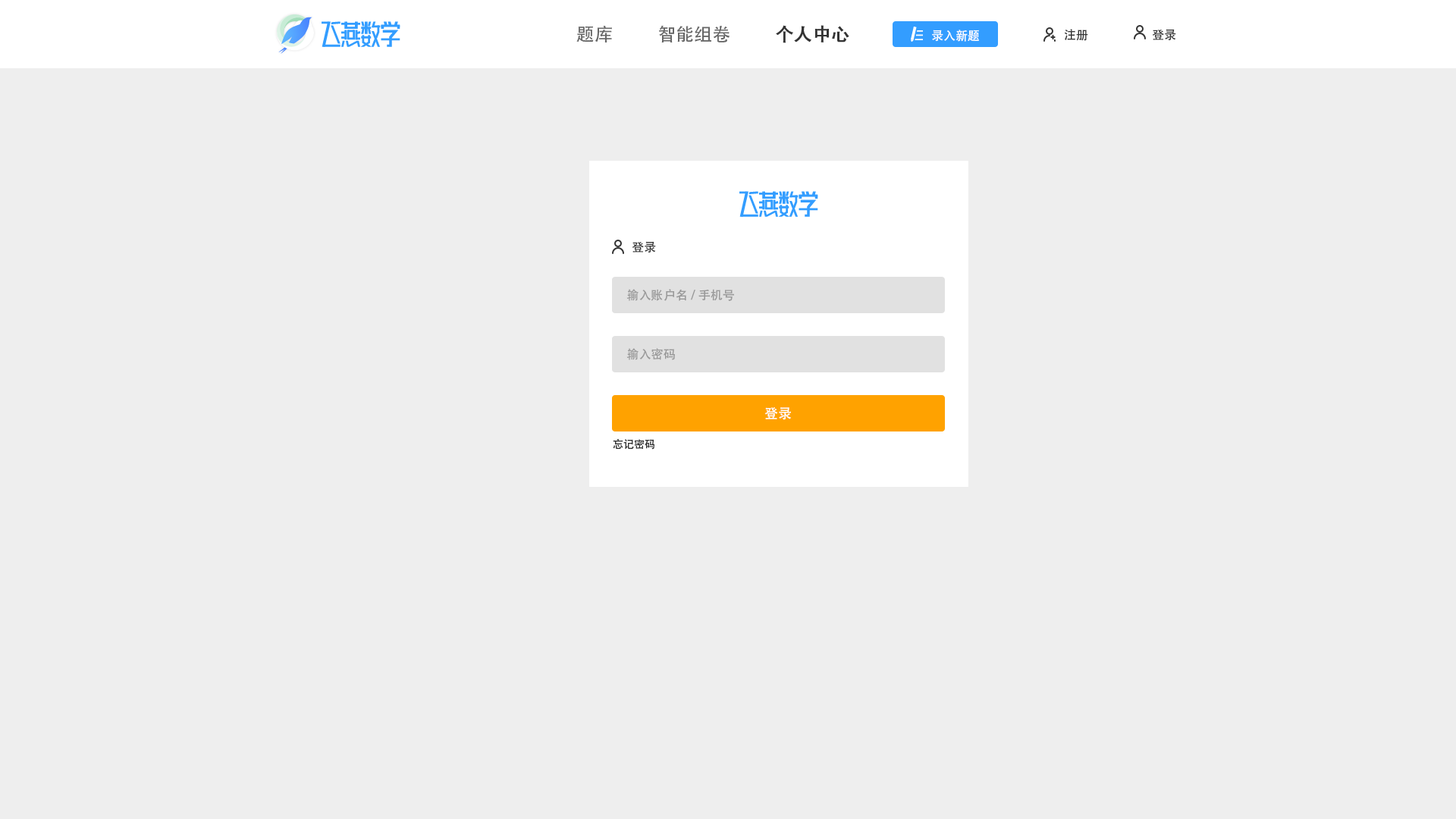
<style>
.page{position:relative;width:1456px;height:819px;background:#eeeeee}
.page>*{position:absolute;margin:0}
.t1{font:18.2px "AdobeHeitiStd-Regular";color:#666666}
.t2{font:18.2px "AdobeHeitiStd-Regular";color:#333333;font-weight:bold}
.t3{font:12.1px "AdobeHeitiStd-Regular";color:#ffffff}
.t4{font:12.1px "AdobeHeitiStd-Regular";color:#333333}
.t5{font:12.1px "AdobeHeitiStd-Regular";color:#999999}
.t6{font:13.6px "AdobeHeitiStd-Regular";color:#ffffff}
.t7{font:10.6px "AdobeHeitiStd-Regular";color:#333333}
</style>
<div class="page">
<p class="t1" style="left:576px;top:26px;width:36px;height:16px">题库</p>
<p class="t1" style="left:659px;top:25px;width:71px;height:17px">智能组卷</p>
<p class="t2" style="left:776px;top:25px;width:73px;height:18px">个人中心</p>
<p class="t3" style="left:932px;top:30px;width:47px;height:12px">录入新题</p>
<p class="t4" style="left:1064px;top:29px;width:24px;height:12px">注册</p>
<p class="t4" style="left:1152px;top:29px;width:24px;height:12px">登录</p>
<p class="t4" style="left:632px;top:241px;width:24px;height:12px">登录</p>
<p class="t5" style="left:626px;top:289px;width:108px;height:12px">输入账户名/手机号</p>
<p class="t5" style="left:626px;top:348px;width:49px;height:12px">输入密码</p>
<p class="t6" style="left:764px;top:407px;width:27px;height:13px">登录</p>
<p class="t7" style="left:613px;top:438px;width:41px;height:12px">忘记密码</p>
</div>
